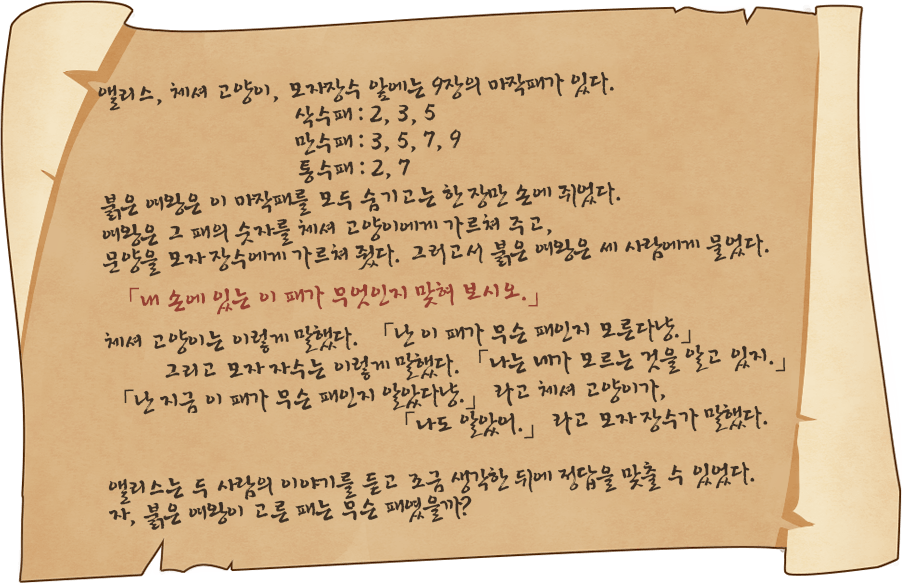
<style>
.page{position:relative;width:902px;height:583px}
.page>*{position:absolute;margin:0}
.t1{font:30.4px/30px "YDIYuroM";letter-spacing:-0.08em;color:#3d3025}
.t2{font:30.4px/26px "YDIYuroM";letter-spacing:-0.08em;color:#3d3025}
.t3{font:30.4px/27px "YDIYuroM";letter-spacing:-0.08em;color:#3d3025}
.t4{font:30.4px/20px "YDIYuroM";letter-spacing:-0.08em;color:#3d3025}
.t5{font:31.5px/20px "YDIYuroM";letter-spacing:-0.08em;color:#964032}
</style>
<div class="page">
<p class="t1" style="left:98px;top:71px;width:688px;height:459px;rotate:-2deg"><span class="t2">앨리스, 체셔 고양이, 모자장수 앞에는 9장의 마작패가 있다.<br></span><span class="t3">　　　　　　　삭수패 : 2, 3, 5<br>　　　　　　　만수패 : 3, 5, 7, 9<br>　　　　　　　</span>통수패 : 2, 7<br>붉은 여왕은 이 마작패를 모두 숨기고는 한 장만 손에 쥐었다.<br><span class="t2">여왕은 그 패의 숫자를 체셔 고양이에게 가르쳐 주고,<br></span><span class="t4">문양을 모자 장수에게 가르쳐 줬다. 그러고서 붉은 여왕은 세 사람에게 물었다.<br><br></span><span class="t5"> 「내 손에 있는 이 패가 무엇인지 맞혀 보시오.」<br><br></span>체셔 고양이는 이렇게 말했다. 「난 이 패가 무슨 패인지 모른다냥.」<br>　　그리고 모자 자수는 이렇게 말했다.「나는 네가 모르는 것을 알고 있지.」<br>「난 지금 이 패가 무슨 패인지 알았다냥.」라고 체셔 고양이가,<br>　　　　　　　　　　「나도 알았어.」라고 모자 장수가 말했다.<br><span class="t2"><br>앨리스는 두 사람의 이야기를 듣고 조금 생각한 뒤에 정답을 맞출 수 있었다.<br>자, 붉은 여왕이 고른 패는 무슨 패였을까?</span></p>
</div>
